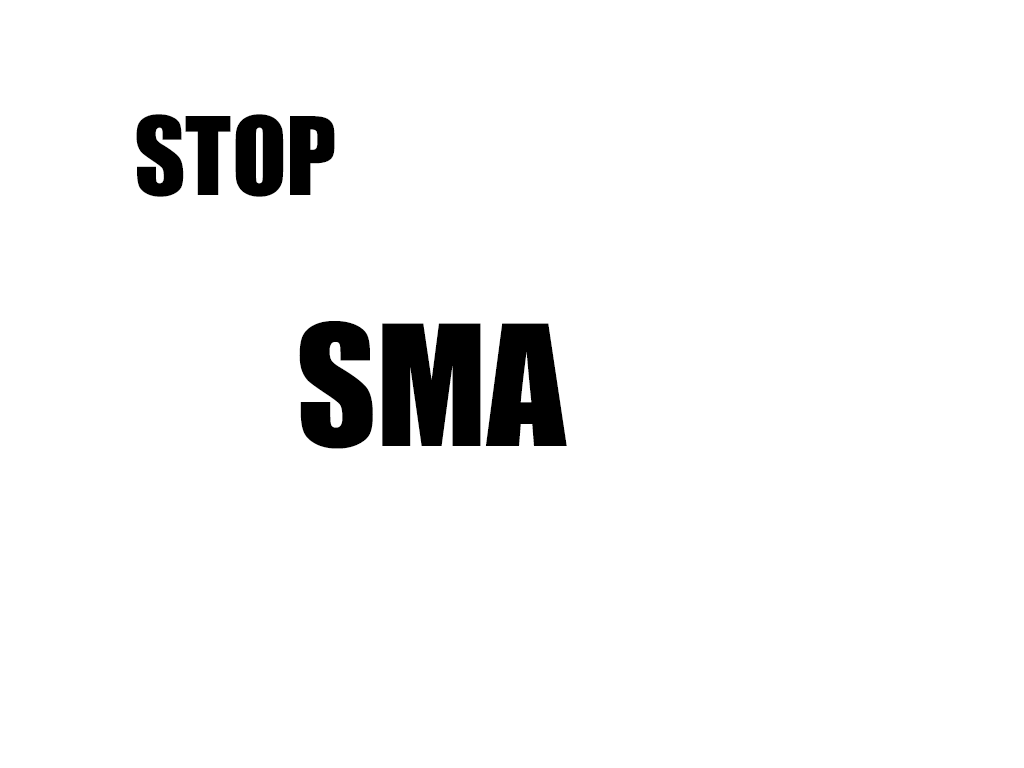
<style>
.page{position:relative;width:1024px;height:768px;background:#ffffff}
.page>*{position:absolute;margin:0}
.t1{font:100px "Impact";color:#000000}
.t2{font:155px "Impact";color:#000000}
</style>
<div class="page">
<p class="t1" style="left:136px;top:114px;width:199px;height:83px">STOP</p>
<p class="t2" style="left:299px;top:321px;width:268px;height:128px">SMA</p>
</div>
